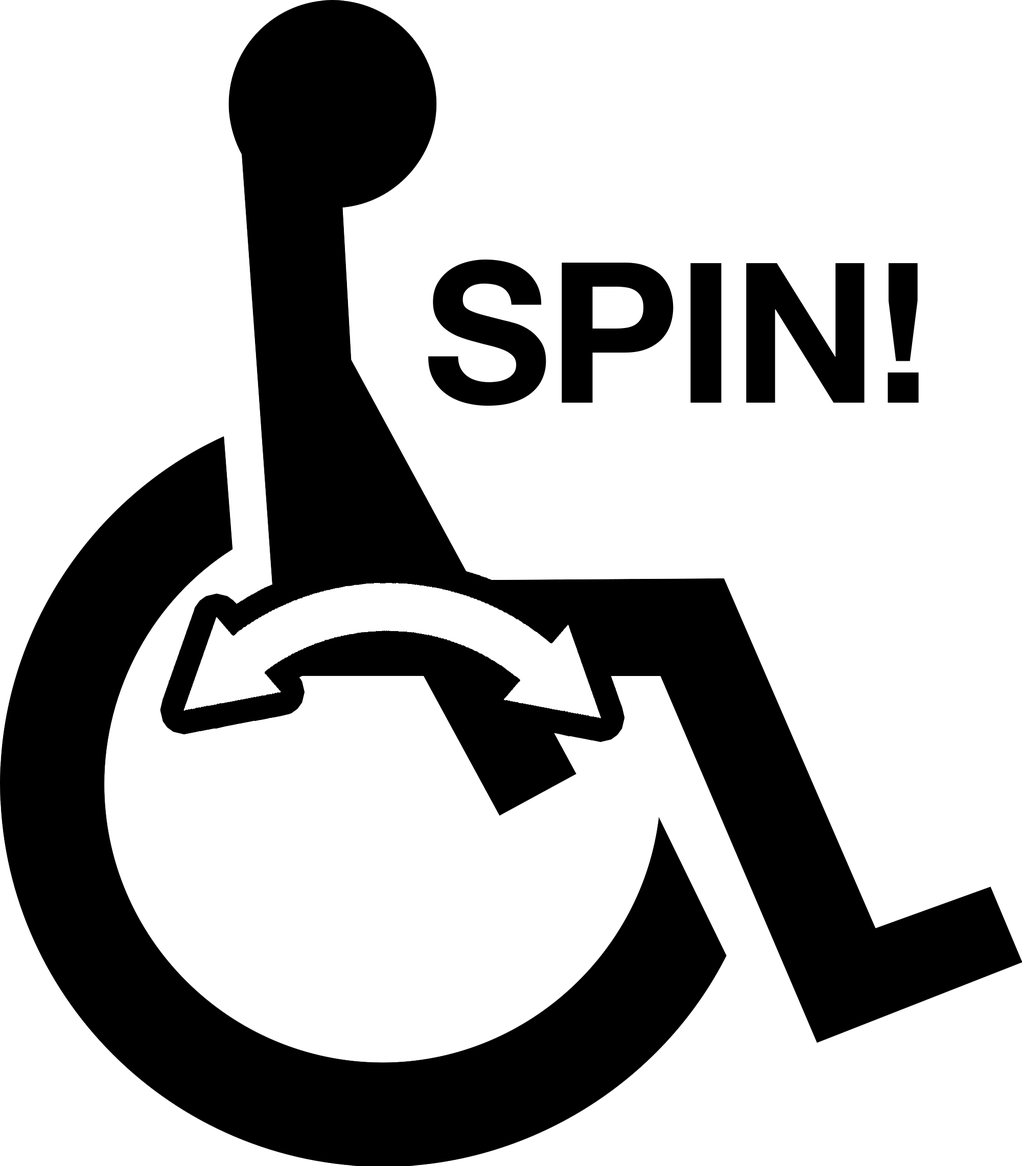
<style>
.page{position:relative;width:1022px;height:1166px;background:#ffffff}
.page>*{position:absolute;margin:0}
.t1{font:195.6px "HelveticaNeue-Bold";letter-spacing:-0.01em;color:#000000}
</style>
<div class="page">
<p class="t1" style="left:428px;top:260px;width:491px;height:146px">SPIN!</p>
</div>
